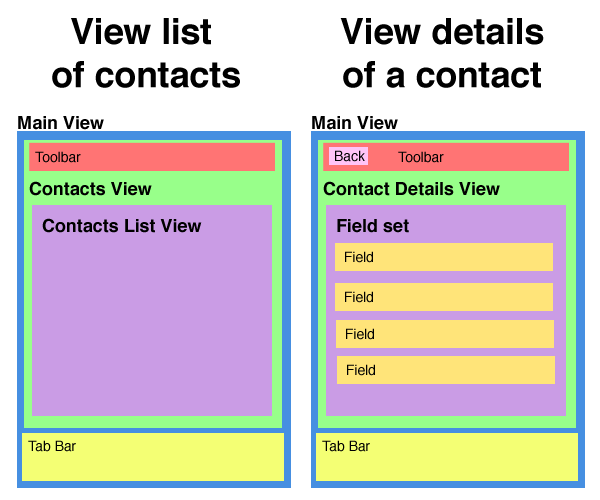
<style>
.page{position:relative;width:600px;height:500px;background:#ffffff}
.page>*{position:absolute;margin:0}
.t1{font:36px "Helvetica-Bold";color:#000000}
.t2{font:18px "Helvetica-Bold";color:#000000}
.t3{font:14px "Helvetica";color:#000000}
</style>
<div class="page">
<p class="t1" style="left:52px;top:18px;width:188px;height:70px;text-align:center">View list <br>of contacts</p>
<p class="t1" style="left:340px;top:18px;width:204px;height:70px;text-align:center">View details<br>of a contact</p>
<p class="t2" style="left:18px;top:116px;width:86px;height:14px">Main View</p>
<p class="t2" style="left:312px;top:116px;width:86px;height:14px">Main View</p>
<p class="t3" style="left:335px;top:150px;width:30px;height:12px">Back</p>
<p class="t3" style="left:35px;top:151px;width:46px;height:12px">Toolbar</p>
<p class="t3" style="left:398px;top:151px;width:46px;height:12px">Toolbar</p>
<p class="t2" style="left:29px;top:181px;width:123px;height:15px">Contacts View</p>
<p class="t2" style="left:323px;top:181px;width:177px;height:15px">Contact Details View</p>
<p class="t2" style="left:42px;top:218px;width:160px;height:15px">Contacts List View</p>
<p class="t2" style="left:337px;top:219px;width:72px;height:14px">Field set</p>
<p class="t3" style="left:345px;top:251px;width:28px;height:12px">Field</p>
<p class="t3" style="left:345px;top:291px;width:28px;height:12px">Field</p>
<p class="t3" style="left:346px;top:328px;width:28px;height:12px">Field</p>
<p class="t3" style="left:347px;top:364px;width:28px;height:12px">Field</p>
<p class="t3" style="left:28px;top:440px;width:48px;height:12px">Tab Bar</p>
<p class="t3" style="left:322px;top:440px;width:48px;height:12px">Tab Bar</p>
</div>
